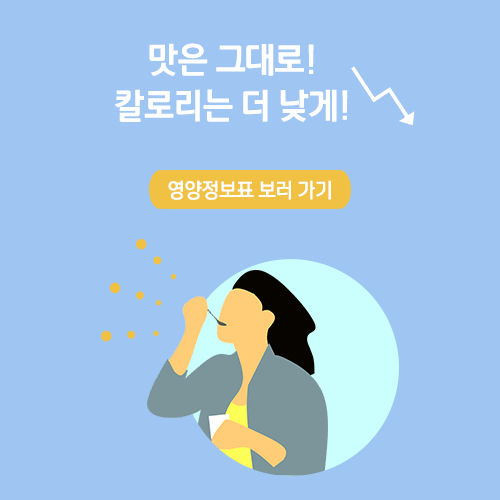
<style>
.page{position:relative;width:500px;height:500px;background:#9fc5f2}
.page>*{position:absolute;margin:0}
.t1{font:33.2px "payboocExtraBold";color:#ffffff;scale:0.95 1}
.t2{font:19.4px "payboocBold";color:#ffffff;scale:0.95 1}
</style>
<div class="page">
<p class="t1" style="left:149px;top:43px;width:165px;height:33px">맛은 그대로!</p>
<p class="t1" style="left:114px;top:89px;width:234px;height:33px">칼로리는 더 낮게!</p>
<p class="t2" style="left:168px;top:180px;width:163px;height:20px">영양정보표 보러 가기</p>
</div>
